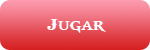
<style>
.page{position:relative;width:150px;height:50px}
.page>*{position:absolute;margin:0}
.t1{font:18px "GodOfWar";color:#ffffff}
</style>
<div class="page">
<p class="t1" style="left:47px;top:19px;width:59px;height:14px">Jugar</p>
</div>
